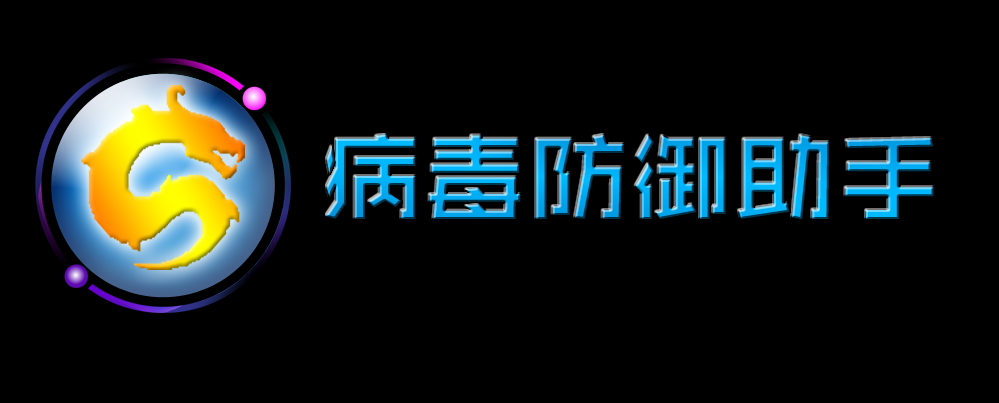
<style>
.page{position:relative;width:999px;height:403px;background:#000000}
.page>*{position:absolute;margin:0}
.t1{font:101.7px "ZHSRXT--GBK1-0"}
</style>
<div class="page">
<p class="t1" style="left:326px;top:134px;width:608px;height:86px">病毒防御助手</p>
</div>
